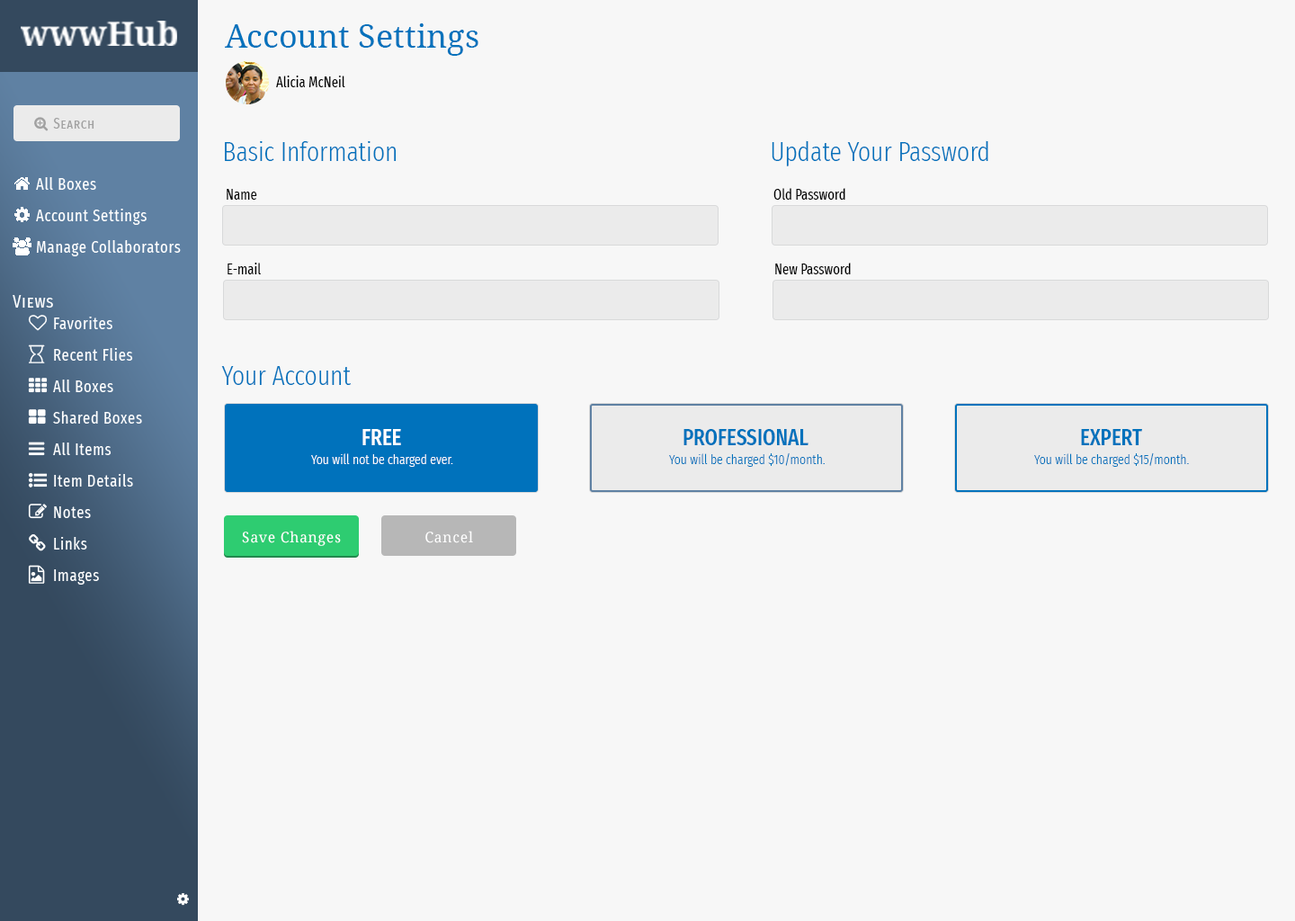
<style>
.page{position:relative;width:1295px;height:921px;background:#f7f7f7}
.page>*{position:absolute;margin:0}
.t1{font:32.4px "DroidSerif";color:#0072bc}
.t2{font:14.4px "FiraSansExtraCondensed-Regular";color:#000000}
.t3{font:27px "FiraSansExtraCondensed-Light";color:#0072bc}
.t4{font:22.5px "FiraSansExtraCondensed-Medium";color:#ffffff}
.t5{font:22.5px "FiraSansExtraCondensed-Medium";color:#0072bc}
.t6{font:13.5px "FiraSansExtraCondensed-Light";color:#ffffff}
.t7{font:13.5px "FiraSansExtraCondensed-Light";color:#0072bc}
.t8{font:14.4px "DroidSerif";letter-spacing:0.04em;color:#ffffff}
</style>
<div class="page">
<p class="t1" style="left:225px;top:23px;width:253px;height:33px">Account Settings</p>
<p class="t2" style="left:276px;top:76px;width:69px;height:11px">Alicia McNeil</p>
<p class="t3" style="left:225px;top:141px;width:172px;height:20px">Basic Information</p>
<p class="t3" style="left:772px;top:140px;width:216px;height:26px">Update Your Password</p>
<p class="t2" style="left:227px;top:189px;width:30px;height:11px">Name</p>
<p class="t2" style="left:773px;top:188px;width:72px;height:12px">Old Password</p>
<p class="t2" style="left:228px;top:263px;width:33px;height:11px">E-mail</p>
<p class="t2" style="left:775px;top:263px;width:76px;height:11px">New Password</p>
<p class="t3" style="left:221px;top:366px;width:131px;height:19px">Your Account</p>
<p class="t4" style="left:362px;top:429px;width:39px;height:16px">FREE</p>
<p class="t5" style="left:683px;top:429px;width:125px;height:16px">PROFESSIONAL</p>
<p class="t5" style="left:1081px;top:429px;width:61px;height:16px">EXPERT</p>
<p class="t6" style="left:311px;top:453px;width:142px;height:14px">You will not be charged ever.</p>
<p class="t7" style="left:669px;top:452px;width:156px;height:15px">You will be charged $10/month.</p>
<p class="t7" style="left:1034px;top:452px;width:155px;height:15px">You will be charged $15/month.</p>
<p class="t8" style="left:242px;top:531px;width:99px;height:15px">Save Changes</p>
<p class="t8" style="left:425px;top:531px;width:48px;height:12px">Cancel</p>
</div>
